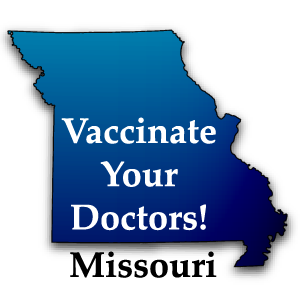
<style>
.page{position:relative;width:300px;height:300px;background:#ffffff}
.page>*{position:absolute;margin:0}
.t1{font:36px "Palatino-Bold";color:#ffffff}
.t2{font:36px "Palatino-Bold";color:#000000}
</style>
<div class="page">
<p class="t1" style="left:61px;top:117px;width:155px;height:114px;text-align:center">Vaccinate<br>Your<br>Doctors!</p>
<p class="t2" style="left:70px;top:251px;width:147px;height:27px">Missouri</p>
</div>
